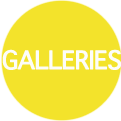
<style>
.page{position:relative;width:121px;height:121px;background:#f3e32b}
.page>*{position:absolute;margin:0}
.t1{font:24px "Thonburi";letter-spacing:-0.05em;color:#fdfdf9;font-weight:bold}
</style>
<div class="page">
<p class="t1" style="left:2px;top:49px;width:119px;height:21px">GALLERIES</p>
</div>
